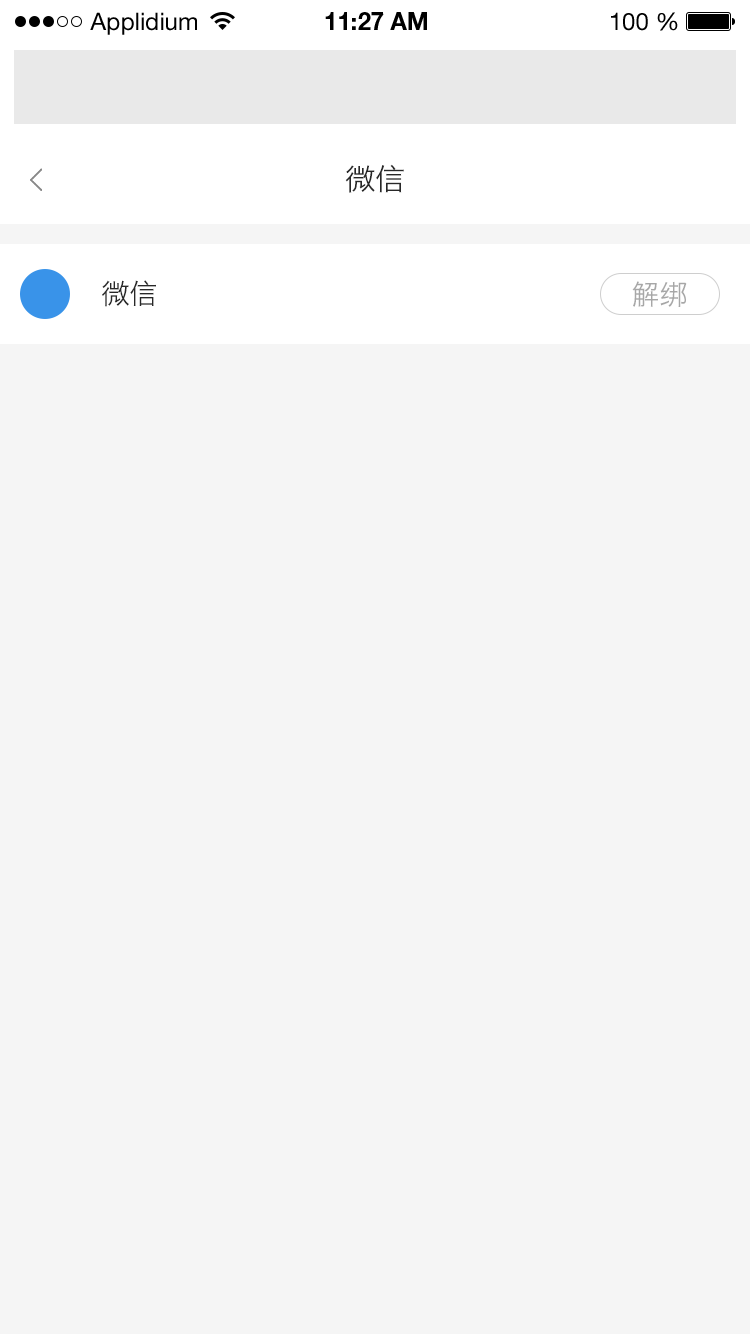
<style>
.page{position:relative;width:750px;height:1334px;background:#f5f5f5}
.page>*{position:absolute;margin:0}
.t1{font:24px "HelveticaNeueLTStd-Roman";color:#000000}
.t2{font:24px "HelveticaNeueLTStd-Bd";color:#000000}
.t3{font:30px "HiraginoSansGB-W3";color:#282828}
.t4{font:28px "HiraginoSansGB-W3";color:#282828}
.t5{font:28px "HiraginoSansGB-W3";color:#a7a7a7}
</style>
<div class="page">
<p class="t1" style="left:90px;top:12px;width:107px;height:23px">Applidium</p>
<p class="t2" style="left:325px;top:12px;width:102px;height:18px">11:27 AM</p>
<p class="t1" style="left:611px;top:12px;width:67px;height:19px">100 %</p>
<p class="t3" style="left:345px;top:164px;width:59px;height:29px">微信</p>
<p class="t4" style="left:102px;top:280px;width:54px;height:27px">微信</p>
<p class="t5" style="left:632px;top:281px;width:55px;height:26px">解绑</p>
</div>
